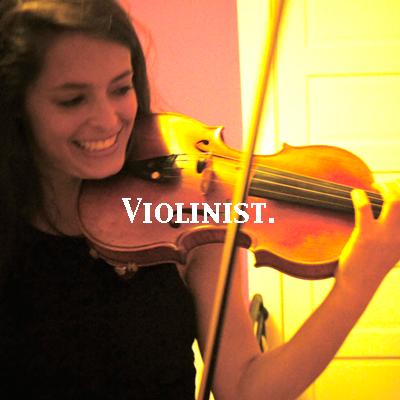
<style>
.page{position:relative;width:400px;height:400px}
.page>*{position:absolute;margin:0}
.t1{font:30px "CapitalsRegular";color:#ffffff}
</style>
<div class="page">
<p class="t1" style="left:122px;top:198px;width:152px;height:25px">Violinist.</p>
</div>
